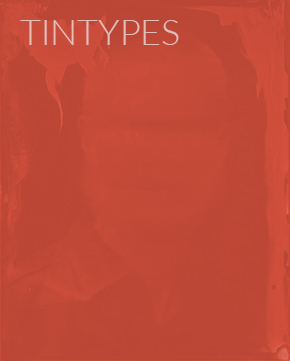
<style>
.page{position:relative;width:290px;height:361px}
.page>*{position:absolute;margin:0}
.t1{font:36px "Lato-Light";color:#e2bdb9}
</style>
<div class="page">
<p class="t1" style="left:20px;top:20px;width:159px;height:25px">TINTYPES</p>
</div>
